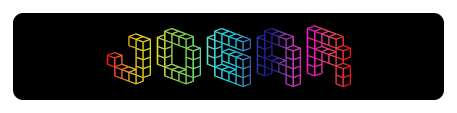
<style>
.page{position:relative;width:457px;height:113px;background:#000000}
.page>*{position:absolute;margin:0}
.t1{font:100px "DemonCubicBlockFont"}
</style>
<div class="page">
<p class="t1" style="left:106px;top:25px;width:245px;height:62px">jogar</p>
</div>
